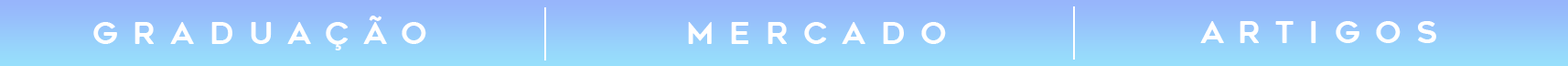
<style>
.page{position:relative;width:1568px;height:66px}
.page>*{position:absolute;margin:0}
.t1{font:30.5px "GeometosRounded";letter-spacing:0.5em;color:#ffffff;text-transform:uppercase}
</style>
<div class="page">
<p class="t1" style="left:93px;top:16px;width:333px;height:34px">graduação</p>
<p class="t1" style="left:688px;top:22px;width:258px;height:22px">mercado</p>
<p class="t1" style="left:1200px;top:21px;width:236px;height:22px">artigos</p>
</div>
